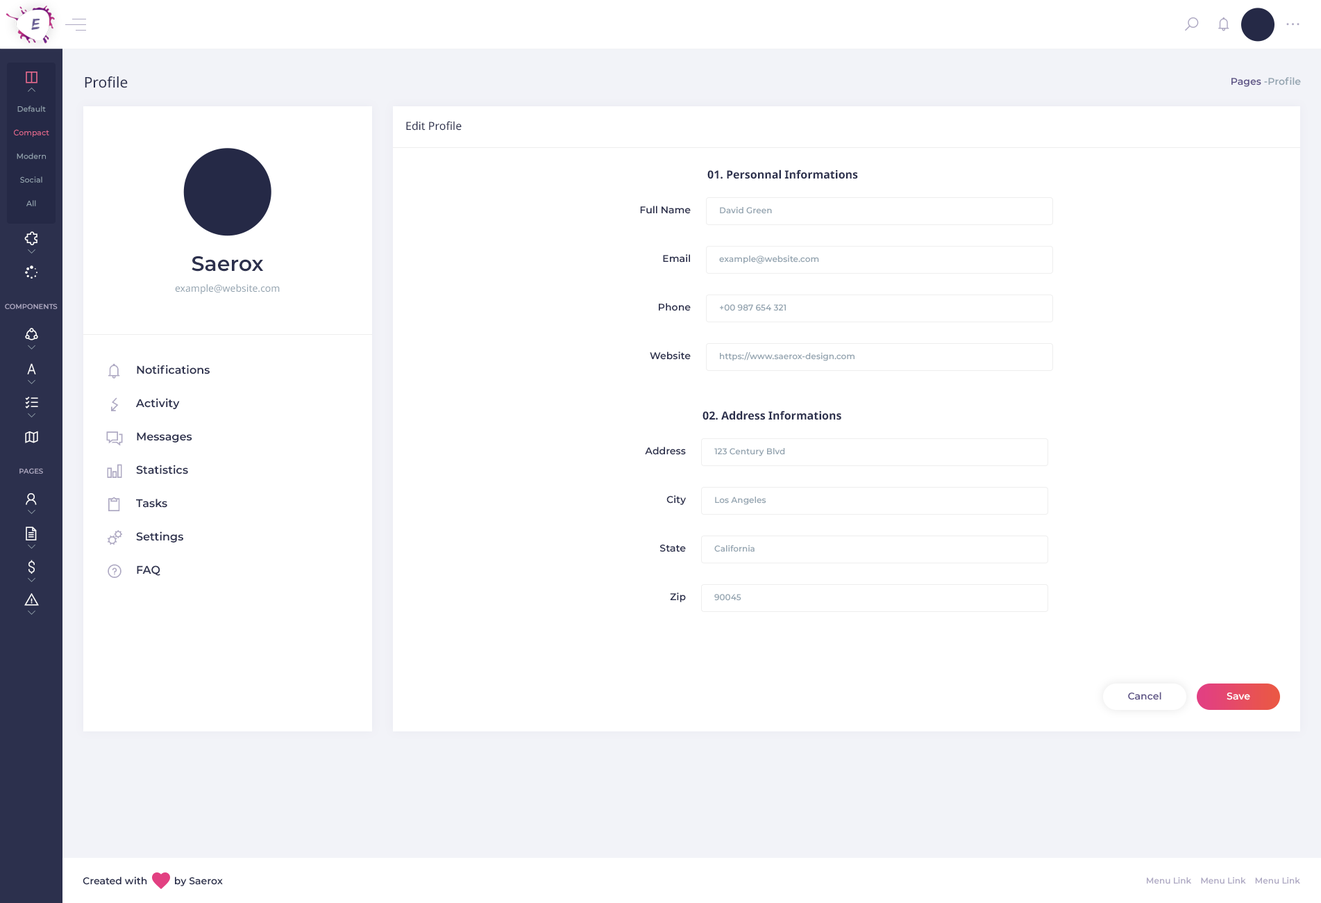
<style>
.page{position:relative;width:1321px;height:903px;background:#ffffff}
.page>*{position:absolute;margin:0}
.t1{font:14.6px "NotoSans-Regular";color:#2c304d}
.t2{font:9.7px "Montserrat-SemiBold";color:#94a4b0}
.t3{font:9.7px "Montserrat-SemiBold";color:#5d5386}
.t4{font:7.6px/23.6px "Montserrat-Medium";color:#98a8b4}
.t5{font:7.6px/23.6px "Montserrat-Medium";color:#e76c90}
.t6{font:11.1px "NotoSans-Regular";color:#2c304d}
.t7{font:11.1px "NotoSans-Bold";color:#2c304d}
.t8{font:9.7px "Montserrat-SemiBold";color:#2c304d}
.t9{font:8.3px "Montserrat-SemiBold";color:#94a4b0}
.t10{font:9.7px/20.8px "NotoSans-Regular";color:#94a4b0}
.t11{font:20.8px/20.8px "Montserrat-SemiBold";color:#2c304d}
.t12{font:6.9px "Montserrat-SemiBold";color:#aea9c3;text-transform:uppercase}
.t13{font:11.1px/33.3px "Montserrat-SemiBold";color:#2c304d}
.t14{font:9.7px "Montserrat-SemiBold";color:#ffffff}
.t15{font:8.3px "Montserrat-SemiBold";color:#aea9c3}
</style>
<div class="page">
<p class="t1" style="left:85px;top:76px;width:43px;height:12px">Profile</p>
<p class="t2" style="left:1232px;top:77px;width:69px;height:10px"><span class="t3">Pages</span> -Profile</p>
<p class="t4" style="left:14px;top:106px;width:35px;height:100px;text-align:center">Default<br><span class="t5">Compact<br></span>Modern<br>Social<br>All</p>
<p class="t6" style="left:406px;top:121px;width:56px;height:10px">Edit Profile</p>
<p class="t7" style="left:707px;top:169px;width:151px;height:10px">01. Personnal Informations</p>
<p class="t8" style="left:640px;top:206px;width:51px;height:8px">Full Name</p>
<p class="t9" style="left:720px;top:206px;width:52px;height:8px">David Green</p>
<p class="t10" style="left:175px;top:255px;width:105px;height:39px;text-align:center"><span class="t11">Saerox<br></span>example@website.com</p>
<p class="t8" style="left:663px;top:254px;width:27px;height:8px">Email</p>
<p class="t9" style="left:719px;top:255px;width:100px;height:9px">example@website.com</p>
<p class="t12" style="left:5px;top:303px;width:53px;height:6px">Components</p>
<p class="t8" style="left:659px;top:303px;width:32px;height:8px">Phone</p>
<p class="t9" style="left:720px;top:304px;width:66px;height:7px">+00 987 654 321</p>
<p class="t8" style="left:650px;top:351px;width:41px;height:9px">Website</p>
<p class="t9" style="left:720px;top:352px;width:135px;height:9px">https://www.saerox-design.com</p>
<p class="t13" style="left:135px;top:364px;width:75px;height:212px">Notifications<br>Activity<br>Messages<br>Statistics<br>Tasks<br>Settings<br>FAQ</p>
<p class="t7" style="left:703px;top:410px;width:138px;height:10px">02. Address Informations</p>
<p class="t8" style="left:645px;top:446px;width:41px;height:9px">Address</p>
<p class="t9" style="left:714px;top:448px;width:71px;height:8px">123 Century Blvd</p>
<p class="t12" style="left:19px;top:468px;width:24px;height:5px">Pages</p>
<p class="t8" style="left:666px;top:495px;width:21px;height:10px">City</p>
<p class="t9" style="left:715px;top:496px;width:51px;height:9px">Los Angeles</p>
<p class="t8" style="left:660px;top:544px;width:26px;height:8px">State</p>
<p class="t9" style="left:714px;top:544px;width:41px;height:8px">California</p>
<p class="t8" style="left:670px;top:592px;width:16px;height:10px">Zip</p>
<p class="t9" style="left:714px;top:594px;width:27px;height:7px">90045</p>
<p class="t3" style="left:1128px;top:691px;width:34px;height:9px">Cancel</p>
<p class="t14" style="left:1227px;top:692px;width:23px;height:8px">Save</p>
<p class="t8" style="left:83px;top:876px;width:140px;height:10px">Created with          by Saerox</p>
<p class="t15" style="left:1147px;top:876px;width:153px;height:8px">Menu Link    Menu Link    Menu Link</p>
</div>
